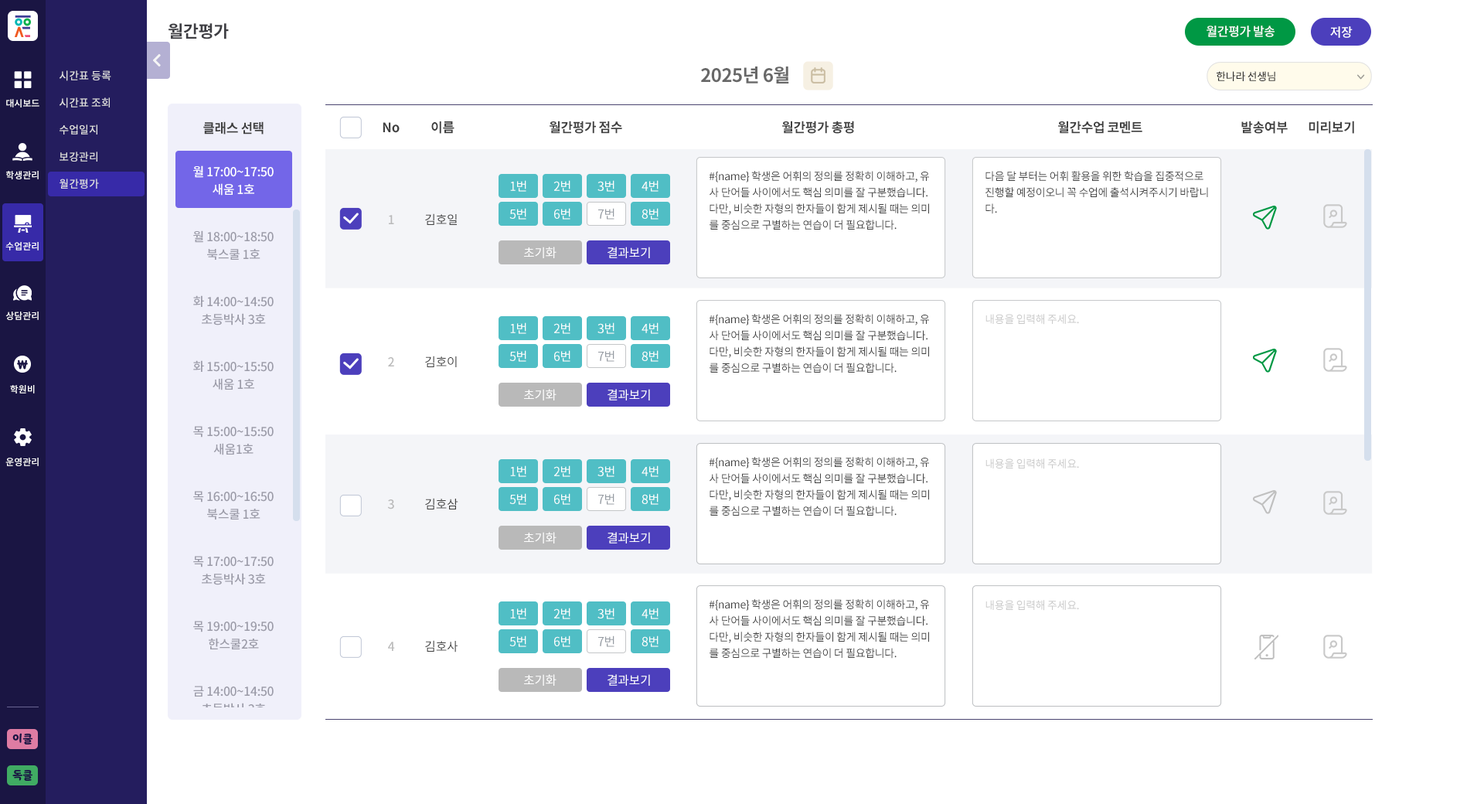
<style>
.page{position:relative;width:1484px;height:804px;background:#ffffff}
.page>*{position:absolute;margin:0}
.t1{font:17px "NotoSansCJKkr-Bold";letter-spacing:-0.025em;color:#3e3e43}
.t2{font:12.4px "NotoSansCJKkr-Medium";letter-spacing:-0.025em;color:#ffffff}
.t3{font:10.8px/27px "NotoSansCJKkr-Medium";color:#e1e1e1}
.t4{font:18.5px "NotoSansCJKkr-Bold";letter-spacing:-0.025em;color:#686868}
.t5{font:10.8px "NotoSansCJKkr-Medium";letter-spacing:-0.025em;color:#323232}
.t6{font:9.3px "NotoSansCJKkr-Medium";color:#ffffff}
.t7{font:13.1px "NotoSansCJKkr-Bold";letter-spacing:-0.025em;color:#404040}
.t8{font:12.4px/64.9px "NotoSansCJKkr-Medium";letter-spacing:-0.025em;color:#9b9ba8}
.t9{font:12.4px/64.9px "NotoSansCJKkr-Medium";letter-spacing:-0.025em;color:#ffffff}
.t10{font:10.8px/16.2px "NotoSansCJKkr-Regular";letter-spacing:-0.025em;color:#404040}
.t11{font:12.4px "NotoSansCJKkr-Regular";letter-spacing:-0.025em;color:#ffffff}
.t12{font:12.4px "NotoSansCJKkr-Regular";letter-spacing:-0.025em;color:#949aa1}
.t13{font:12.4px/142.2px "NotoSansCJKkr-Medium";letter-spacing:-0.025em;color:#a8a8a8}
.t14{font:12.4px/142.2px "NotoSansCJKkr-Regular";letter-spacing:-0.025em;color:#404040}
.t15{font:10.8px "NotoSansCJKkr-Regular";letter-spacing:-0.025em;color:#c8c8c8}
.t16{font:10.8px "YoonSoftSlime";color:#1a1543}
</style>
<div class="page">
<p class="t1" style="left:168px;top:23px;width:61px;height:16px">월간평가</p>
<p class="t2" style="left:1206px;top:26px;width:68px;height:11px">월간평가 발송</p>
<p class="t2" style="left:1330px;top:26px;width:22px;height:12px">저장</p>
<p class="t3" style="left:60px;top:70px;width:51px;height:119px">시간표 등록<br>시간표 조회<br>수업일지<br>보강관리<br>월간평가</p>
<p class="t4" style="left:701px;top:66px;width:88px;height:17px">2025년 6월</p>
<p class="t5" style="left:1216px;top:71px;width:59px;height:10px">한나라 선생님</p>
<p class="t6" style="left:6px;top:99px;width:33px;height:8px">대시보드</p>
<p class="t7" style="left:203px;top:121px;width:61px;height:13px">클래스 선택</p>
<p class="t7" style="left:383px;top:122px;width:17px;height:11px">No</p>
<p class="t7" style="left:431px;top:121px;width:23px;height:13px">이름</p>
<p class="t7" style="left:549px;top:121px;width:73px;height:13px">월간평가 점수</p>
<p class="t7" style="left:782px;top:121px;width:72px;height:13px">월간평가 총평</p>
<p class="t7" style="left:1058px;top:121px;width:84px;height:13px">월간수업 코멘트</p>
<p class="t7" style="left:1241px;top:121px;width:46px;height:13px">발송여부</p>
<p class="t7" style="left:1308px;top:121px;width:46px;height:13px">미리보기</p>
<p class="t6" style="left:6px;top:171px;width:33px;height:8px">학생관리</p>
<p class="t8" style="left:193px;top:165px;width:81px;height:531px;text-align:center"><span class="t9">월 17:00~17:50<br></span>월 18:00~18:50<br>화 14:00~14:50<br>화 15:00~15:50<br>목 15:00~15:50<br>목 16:00~16:50<br>목 17:00~17:50<br>목 19:00~19:50<br>금 14:00~14:50</p>
<p class="t10" style="left:709px;top:171px;width:220px;height:59px">#{name} 학생은 어휘의 정의를 정확히 이해하고, 유<br>사 단어들 사이에서도 핵심 의미를 잘 구분했습니다.<br>다만, 비슷한 자형의 한자들이 함게 제시될 때는 의미<br>를 중심으로 구별하는 연습이 더 필요합니다.</p>
<p class="t10" style="left:985px;top:171px;width:223px;height:43px">다음 달 부터는 어휘 활용을 위한 학습을 집중적으로<br>진행할 예정이오니 꼭 수업에 출석시켜주시기 바랍니<br>다.</p>
<p class="t8" style="left:202px;top:183px;width:64px;height:532px;text-align:center"><span class="t9">새움 1호<br></span>북스쿨 1호<br>초등박사 3호<br>새움 1호<br>새움1호<br>북스쿨 1호<br>초등박사 3호<br>한스쿨2호<br>초등박사 3호</p>
<p class="t11" style="left:510px;top:180px;width:16px;height:12px">1번</p>
<p class="t11" style="left:553px;top:180px;width:17px;height:12px">2번</p>
<p class="t11" style="left:597px;top:180px;width:17px;height:12px">3번</p>
<p class="t11" style="left:641px;top:180px;width:17px;height:12px">4번</p>
<p class="t11" style="left:509px;top:208px;width:17px;height:11px">5번</p>
<p class="t11" style="left:554px;top:208px;width:16px;height:11px">6번</p>
<p class="t12" style="left:598px;top:208px;width:16px;height:11px">7번</p>
<p class="t11" style="left:641px;top:208px;width:17px;height:11px">8번</p>
<p class="t13" style="left:387px;top:215px;width:8px;height:436px;text-align:center;opacity:0.8">1<br>2<br>3<br>4</p>
<p class="t14" style="left:425px;top:213px;width:33px;height:439px">김호일<br>김호이<br>김호삼<br>김호사</p>
<p class="t6" style="left:5px;top:242px;width:34px;height:8px">수업관리</p>
<p class="t11" style="left:524px;top:247px;width:32px;height:11px">초기화</p>
<p class="t11" style="left:607px;top:247px;width:43px;height:11px">결과보기</p>
<p class="t6" style="left:5px;top:311px;width:34px;height:9px">상담관리</p>
<p class="t10" style="left:709px;top:314px;width:220px;height:59px">#{name} 학생은 어휘의 정의를 정확히 이해하고, 유<br>사 단어들 사이에서도 핵심 의미를 잘 구분했습니다.<br>다만, 비슷한 자형의 한자들이 함게 제시될 때는 의미<br>를 중심으로 구별하는 연습이 더 필요합니다.</p>
<p class="t15" style="left:985px;top:314px;width:94px;height:11px">내용을 입력해 주세요.</p>
<p class="t11" style="left:510px;top:322px;width:16px;height:12px">1번</p>
<p class="t11" style="left:553px;top:322px;width:17px;height:12px">2번</p>
<p class="t11" style="left:597px;top:322px;width:17px;height:12px">3번</p>
<p class="t11" style="left:641px;top:322px;width:17px;height:12px">4번</p>
<p class="t11" style="left:509px;top:350px;width:17px;height:12px">5번</p>
<p class="t11" style="left:554px;top:350px;width:16px;height:12px">6번</p>
<p class="t12" style="left:598px;top:350px;width:16px;height:12px">7번</p>
<p class="t11" style="left:641px;top:350px;width:17px;height:12px">8번</p>
<p class="t6" style="left:10px;top:385px;width:25px;height:8px">학원비</p>
<p class="t11" style="left:524px;top:389px;width:32px;height:11px">초기화</p>
<p class="t11" style="left:607px;top:389px;width:43px;height:11px">결과보기</p>
<p class="t6" style="left:5px;top:457px;width:34px;height:9px">운영관리</p>
<p class="t10" style="left:709px;top:457px;width:220px;height:59px">#{name} 학생은 어휘의 정의를 정확히 이해하고, 유<br>사 단어들 사이에서도 핵심 의미를 잘 구분했습니다.<br>다만, 비슷한 자형의 한자들이 함게 제시될 때는 의미<br>를 중심으로 구별하는 연습이 더 필요합니다.</p>
<p class="t15" style="left:985px;top:458px;width:94px;height:11px">내용을 입력해 주세요.</p>
<p class="t11" style="left:510px;top:465px;width:16px;height:12px">1번</p>
<p class="t11" style="left:553px;top:465px;width:17px;height:12px">2번</p>
<p class="t11" style="left:597px;top:465px;width:17px;height:12px">3번</p>
<p class="t11" style="left:641px;top:465px;width:17px;height:12px">4번</p>
<p class="t11" style="left:509px;top:493px;width:17px;height:12px">5번</p>
<p class="t11" style="left:554px;top:493px;width:16px;height:12px">6번</p>
<p class="t12" style="left:598px;top:493px;width:16px;height:12px">7번</p>
<p class="t11" style="left:641px;top:493px;width:17px;height:12px">8번</p>
<p class="t11" style="left:524px;top:532px;width:32px;height:11px">초기화</p>
<p class="t11" style="left:607px;top:532px;width:43px;height:11px">결과보기</p>
<p class="t10" style="left:709px;top:599px;width:220px;height:59px">#{name} 학생은 어휘의 정의를 정확히 이해하고, 유<br>사 단어들 사이에서도 핵심 의미를 잘 구분했습니다.<br>다만, 비슷한 자형의 한자들이 함게 제시될 때는 의미<br>를 중심으로 구별하는 연습이 더 필요합니다.</p>
<p class="t15" style="left:985px;top:600px;width:94px;height:10px">내용을 입력해 주세요.</p>
<p class="t11" style="left:510px;top:607px;width:16px;height:12px">1번</p>
<p class="t11" style="left:553px;top:607px;width:17px;height:12px">2번</p>
<p class="t11" style="left:597px;top:607px;width:17px;height:12px">3번</p>
<p class="t11" style="left:641px;top:607px;width:17px;height:12px">4번</p>
<p class="t11" style="left:509px;top:635px;width:17px;height:12px">5번</p>
<p class="t11" style="left:554px;top:635px;width:16px;height:12px">6번</p>
<p class="t12" style="left:598px;top:635px;width:16px;height:12px">7번</p>
<p class="t11" style="left:641px;top:635px;width:17px;height:12px">8번</p>
<p class="t11" style="left:524px;top:674px;width:32px;height:11px">초기화</p>
<p class="t11" style="left:607px;top:674px;width:43px;height:11px">결과보기</p>
<p class="t16" style="left:12px;top:733px;width:20px;height:11px">이클</p>
<p class="t16" style="left:12px;top:770px;width:20px;height:10px">독클</p>
</div>
